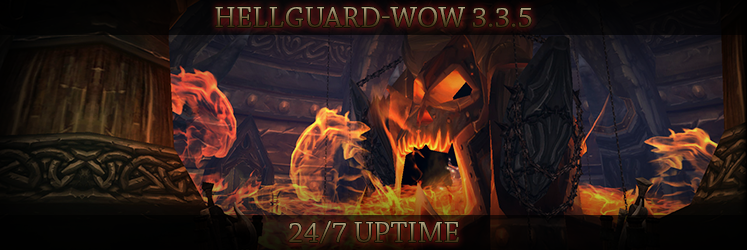
<style>
.page{position:relative;width:747px;height:250px}
.page>*{position:absolute;margin:0}
.t1{font:30px "ChaparralPro-Regular";text-transform:uppercase}
</style>
<div class="page">
<p class="t1" style="left:215px;top:7px;width:317px;height:20px">Hellguard-WoW 3.3.5</p>
<p class="t1" style="left:289px;top:221px;width:170px;height:23px">24/7 uptime</p>
</div>
